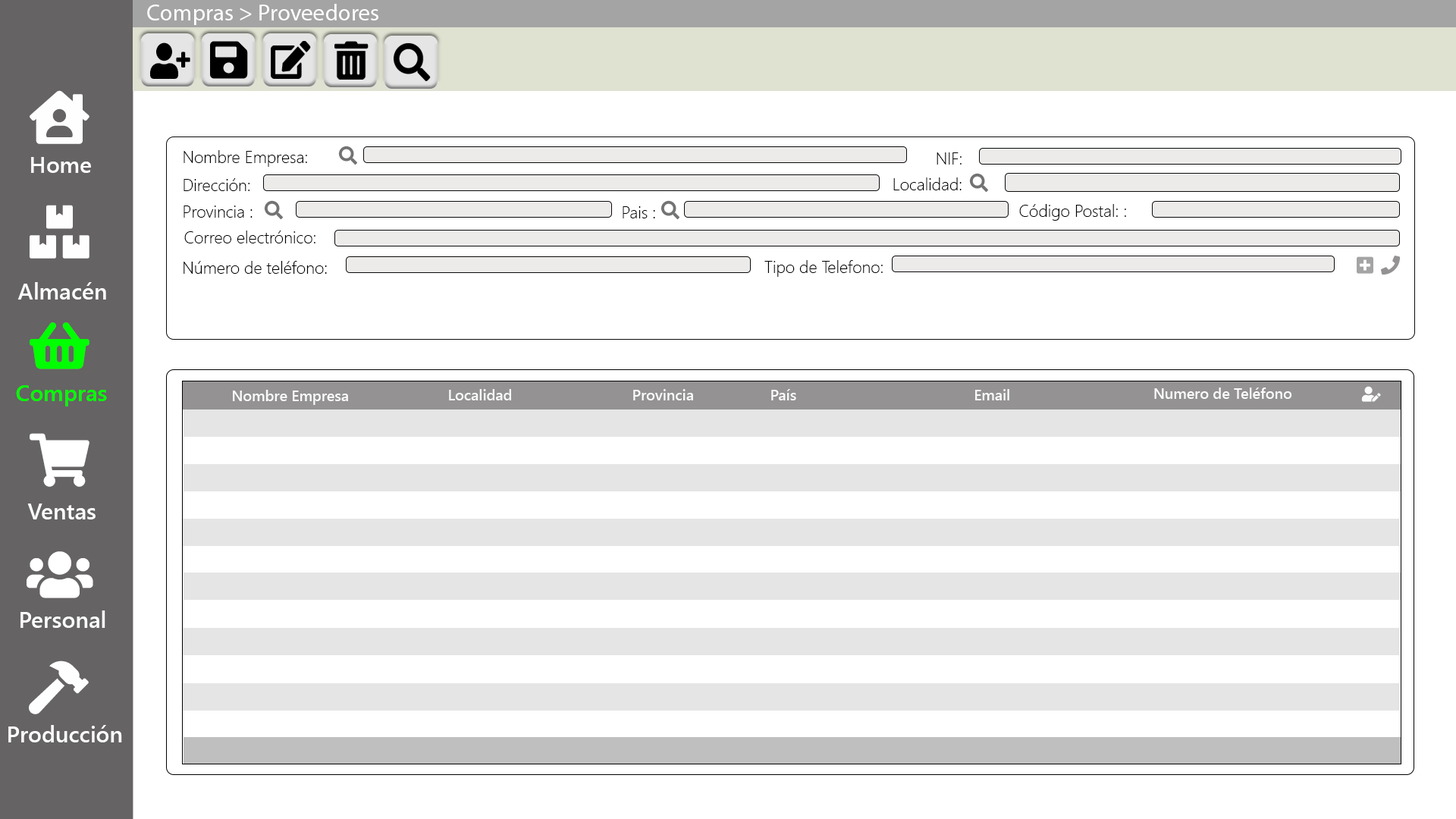
<style>
.page{position:relative;width:1456px;height:819px;background:#ffffff}
.page>*{position:absolute;margin:0}
.t1{font:23.5px "MyriadPro-Regular";color:#ffffff}
.t2{font:22.7px "SegoeUI-Semibold";color:#ffffff}
.t3{font:16.7px "SegoeUI-Light";color:#000000}
.t4{font:22.7px "SegoeUI-Semibold";color:#00ff00}
.t5{font:14.9px "SegoeUI-Semibold";color:#fbfbfb}
.t6{font:22.7px "SegoeUI-Semibold";color:#fefffe}
</style>
<div class="page">
<p class="t1" style="left:147px;top:4px;width:231px;height:21px">Compras &gt; Proveedores</p>
<p class="t2" style="left:31px;top:157px;width:60px;height:16px">Home</p>
<p class="t3" style="left:184px;top:150px;width:123px;height:17px">Nombre Empresa:</p>
<p class="t3" style="left:937px;top:152px;width:25px;height:13px">NIF:</p>
<p class="t3" style="left:184px;top:178px;width:66px;height:13px">Dirección:</p>
<p class="t3" style="left:893px;top:177px;width:69px;height:13px">Localidad:</p>
<p class="t3" style="left:184px;top:206px;width:69px;height:12px">Provincia :</p>
<p class="t3" style="left:623px;top:206px;width:32px;height:12px">Pais :</p>
<p class="t3" style="left:1019px;top:204px;width:107px;height:17px">Código Postal: :</p>
<p class="t3" style="left:184px;top:231px;width:131px;height:12px">Correo electrónico:</p>
<p class="t3" style="left:184px;top:261px;width:143px;height:13px">Número de teléfono:</p>
<p class="t3" style="left:764px;top:260px;width:119px;height:17px">Tipo de Telefono:</p>
<p class="t2" style="left:17px;top:282px;width:89px;height:18px">Almacén</p>
<p class="t4" style="left:16px;top:385px;width:91px;height:21px">Compras</p>
<p class="t5" style="left:233px;top:390px;width:115px;height:15px">Nombre Empresa</p>
<p class="t5" style="left:449px;top:389px;width:62px;height:11px">Localidad</p>
<p class="t5" style="left:633px;top:389px;width:60px;height:11px">Provincia</p>
<p class="t5" style="left:771px;top:389px;width:25px;height:11px">País</p>
<p class="t5" style="left:975px;top:389px;width:34px;height:11px">Email</p>
<p class="t5" style="left:1154px;top:388px;width:138px;height:11px">Numero de Teléfono</p>
<p class="t2" style="left:27px;top:504px;width:69px;height:15px">Ventas</p>
<p class="t6" style="left:20px;top:610px;width:85px;height:18px">Personal</p>
<p class="t2" style="left:8px;top:725px;width:114px;height:17px">Producción</p>
</div>
